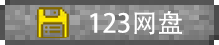
<style>
.page{position:relative;width:219px;height:45px}
.page>*{position:absolute;margin:0}
.t1{font:26px "AdobeHeitiStd-Regular";color:#ffffff}
</style>
<div class="page">
<p class="t1" style="left:90px;top:11px;width:92px;height:24px">123网盘</p>
</div>
